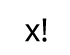
<style>
.page{position:relative;width:70px;height:55px;background:#ffffff}
.page>*{position:absolute;margin:0}
.t1{font:31.8px "DroidSans";color:#000000}
</style>
<div class="page">
<p class="t1" style="left:25px;top:18px;width:22px;height:24px">x!</p>
</div>
